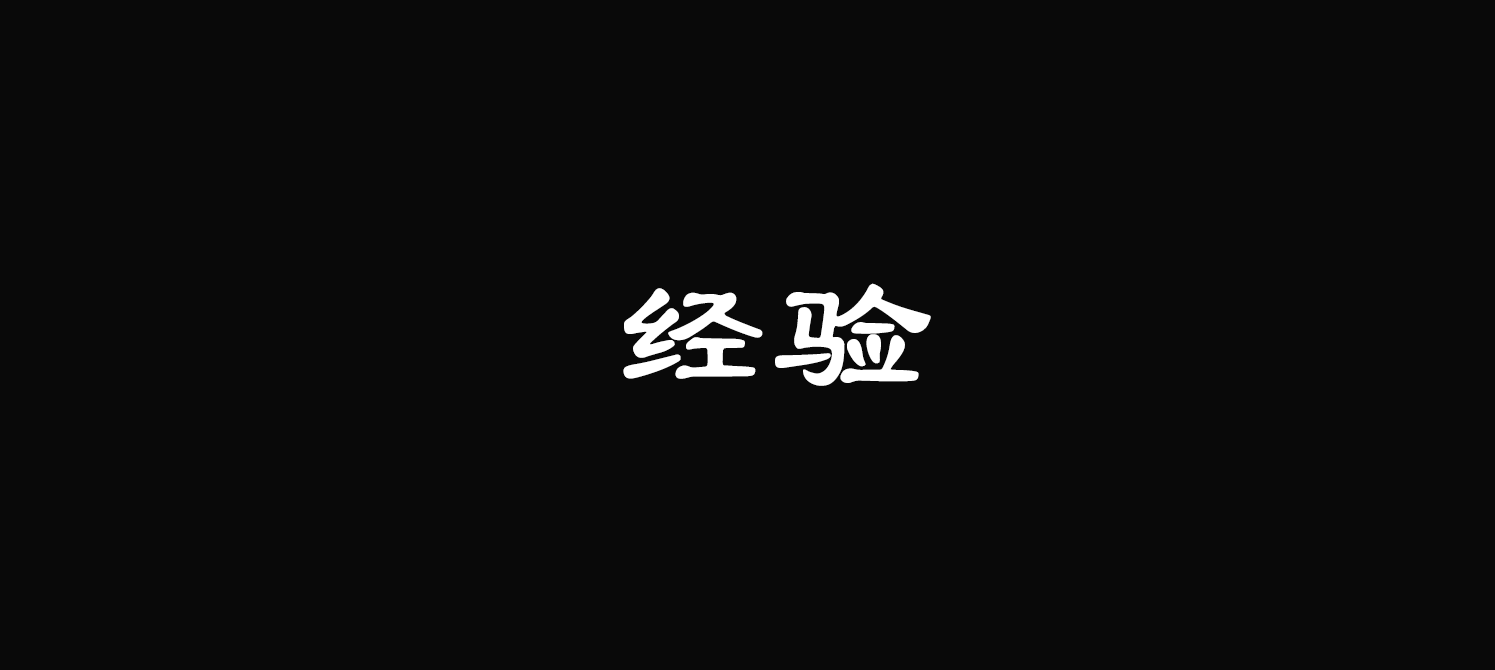
<style>
.page{position:relative;width:1495px;height:670px;background:#090909}
.page>*{position:absolute;margin:0}
.t1{font:160px "STBaoliTC-Regular";color:#ffffff}
</style>
<div class="page">
<p class="t1" style="left:623px;top:283px;width:308px;height:103px">经验</p>
</div>
